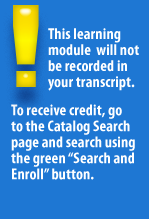
<style>
.page{position:relative;width:149px;height:219px;background:#1e77d3}
.page>*{position:absolute;margin:0}
.t1{font:16px/16px "MyriadPro-BoldCond";letter-spacing:0.005em;color:#ffffff}
</style>
<div class="page">
<p class="t1" style="left:48px;top:28px;width:91px;height:63px">This learning module  will not be recorded in your transcript.</p>
<p class="t1" style="left:11px;top:104px;width:124px;height:76px">To receive credit, go<br>to the Catalog Search page and search using the green “Search and Enroll” button.</p>
</div>
